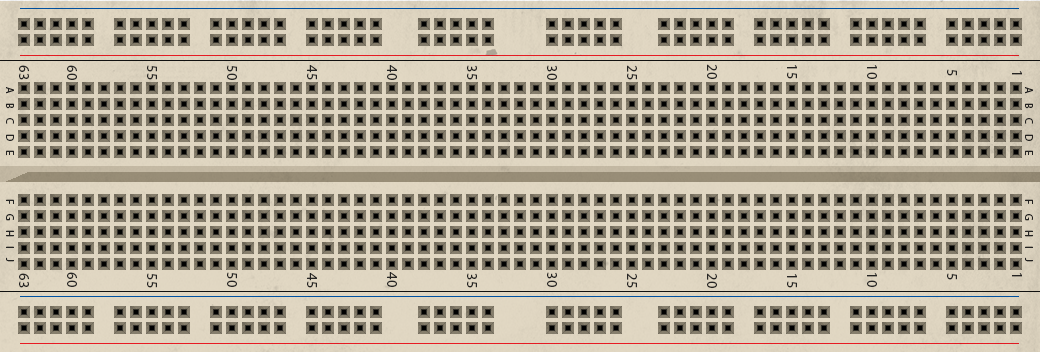
<style>
.page{position:relative;width:1040px;height:352px}
.page>*{position:absolute;margin:0}
.t1{font:14.2px "MyriadPro-Regular";color:#272625}
.t2{font:14.2px "MyriadPro-Regular";letter-spacing:0.84em;color:#272625}
.t3{font:10.9px "MyriadPro-Regular";letter-spacing:0.84em;color:#272625}
</style>
<div class="page">
<p class="t1" style="left:19px;top:65px;width:10px;height:15px;rotate:90deg">63</p>
<p class="t1" style="left:67px;top:65px;width:10px;height:15px;rotate:90deg">60</p>
<p class="t1" style="left:147px;top:65px;width:10px;height:15px;rotate:90deg">55</p>
<p class="t1" style="left:227px;top:65px;width:10px;height:15px;rotate:90deg">50</p>
<p class="t1" style="left:307px;top:65px;width:10px;height:15px;rotate:90deg">45</p>
<p class="t1" style="left:387px;top:65px;width:10px;height:15px;rotate:90deg">40</p>
<p class="t1" style="left:467px;top:65px;width:10px;height:15px;rotate:90deg">35</p>
<p class="t1" style="left:547px;top:65px;width:10px;height:15px;rotate:90deg">30</p>
<p class="t1" style="left:627px;top:65px;width:10px;height:15px;rotate:90deg">25</p>
<p class="t1" style="left:707px;top:64px;width:10px;height:15px;rotate:90deg">20</p>
<p class="t1" style="left:787px;top:65px;width:10px;height:14px;rotate:90deg">15</p>
<p class="t1" style="left:867px;top:65px;width:10px;height:14px;rotate:90deg">10</p>
<p class="t2" style="left:947px;top:69px;width:10px;height:7px;rotate:90deg">5</p>
<p class="t2" style="left:1012px;top:71px;width:10px;height:4px;rotate:90deg">1</p>
<p class="t3" style="left:6px;top:87px;width:8px;height:69px;rotate:90deg">ABCDE</p>
<p class="t3" style="left:1025px;top:87px;width:8px;height:69px;rotate:90deg">ABCDE</p>
<p class="t3" style="left:6px;top:199px;width:8px;height:63px;rotate:90deg">FGHIJ</p>
<p class="t3" style="left:1025px;top:199px;width:8px;height:63px;rotate:90deg">FGHIJ</p>
<p class="t1" style="left:19px;top:273px;width:10px;height:15px;rotate:90deg">63</p>
<p class="t1" style="left:67px;top:272px;width:10px;height:15px;rotate:90deg">60</p>
<p class="t1" style="left:147px;top:273px;width:10px;height:15px;rotate:90deg">55</p>
<p class="t1" style="left:227px;top:272px;width:10px;height:15px;rotate:90deg">50</p>
<p class="t1" style="left:307px;top:273px;width:10px;height:15px;rotate:90deg">45</p>
<p class="t1" style="left:387px;top:272px;width:10px;height:15px;rotate:90deg">40</p>
<p class="t1" style="left:467px;top:273px;width:10px;height:15px;rotate:90deg">35</p>
<p class="t1" style="left:547px;top:272px;width:10px;height:15px;rotate:90deg">30</p>
<p class="t1" style="left:627px;top:273px;width:10px;height:15px;rotate:90deg">25</p>
<p class="t1" style="left:707px;top:273px;width:10px;height:15px;rotate:90deg">20</p>
<p class="t1" style="left:787px;top:274px;width:10px;height:14px;rotate:90deg">15</p>
<p class="t1" style="left:867px;top:273px;width:10px;height:14px;rotate:90deg">10</p>
<p class="t2" style="left:947px;top:273px;width:10px;height:7px;rotate:90deg">5</p>
<p class="t2" style="left:1012px;top:273px;width:10px;height:4px;rotate:90deg">1</p>
</div>
